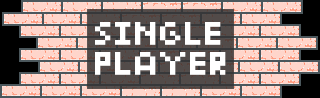
<style>
.page{position:relative;width:320px;height:98px;background:#ffd5ca}
.page>*{position:absolute;margin:0}
.t1{font:22.5px "OurQuinny";color:#ffffff;text-transform:uppercase;scale:1.11 1}
</style>
<div class="page">
<p class="t1" style="left:95px;top:22px;width:131px;height:53px;text-align:center">SINGLE <br>PLAYER</p>
</div>
